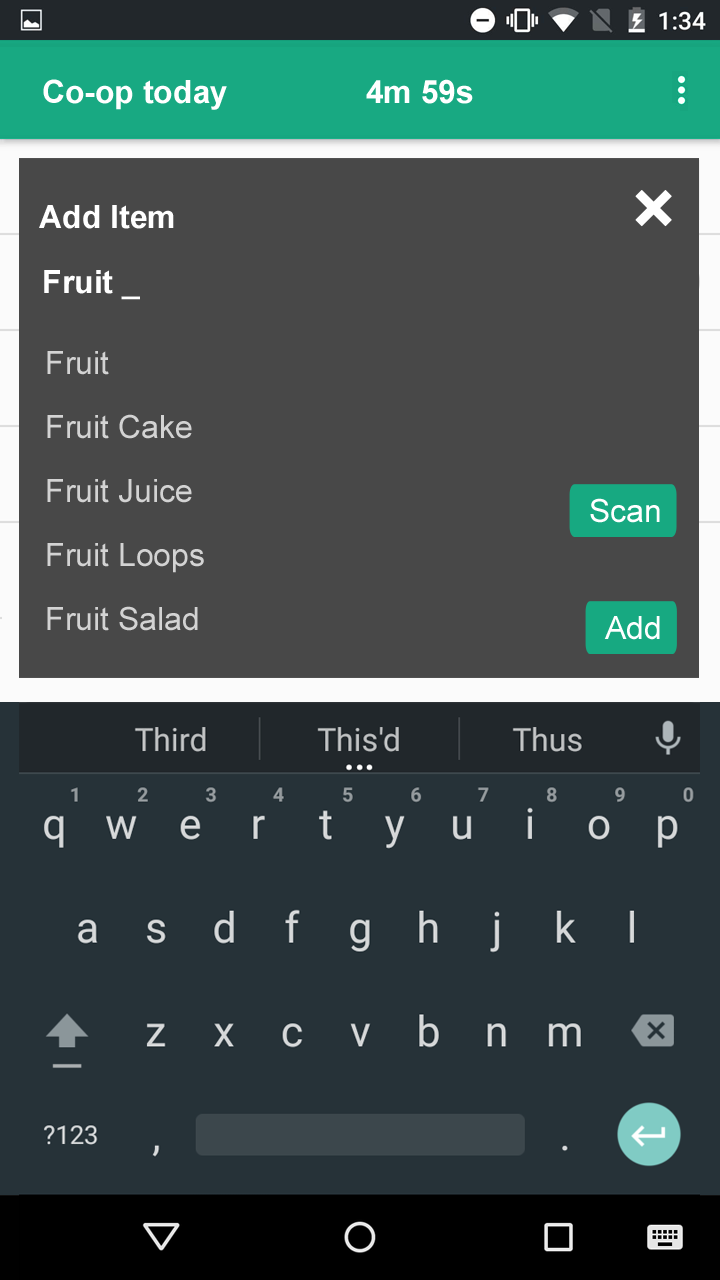
<style>
.page{position:relative;width:720px;height:1280px;background:#484848}
.page>*{position:absolute;margin:0}
.t1{font:32px "Arial-BoldMT";color:#ffffff}
.t2{font:32px "Arial-BoldMT"}
.t3{font:32px/64px "ArialMT";color:#d3d3d3}
.t4{font:32px/64px "ArialMT"}
.t5{font:32px "ArialMT";color:#ffffff}
</style>
<div class="page">
<p class="t1" style="left:43px;top:79px;width:430px;height:31px">Co-op today    4m 59s</p>
<p class="t1" style="left:39px;top:205px;width:135px;height:24px">Add Item</p>
<p class="t1" style="left:44px;top:270px;width:96px;height:30px">Fruit _</p>
<p class="t2" style="left:45px;top:272px;width:96px;height:30px">Fruit _</p>
<p class="t3" style="left:47px;top:351px;width:157px;height:280px">Fruit<br>Fruit Cake<br>Fruit Juice<br>Fruit Loops<br>Fruit Salad</p>
<p class="t4" style="left:48px;top:353px;width:157px;height:280px">Fruit<br>Fruit Cake<br>Fruit Juice<br>Fruit Loops<br>Fruit Salad</p>
<p class="t5" style="left:590px;top:498px;width:70px;height:25px">Scan</p>
<p class="t5" style="left:604px;top:616px;width:56px;height:24px">Add</p>
</div>
